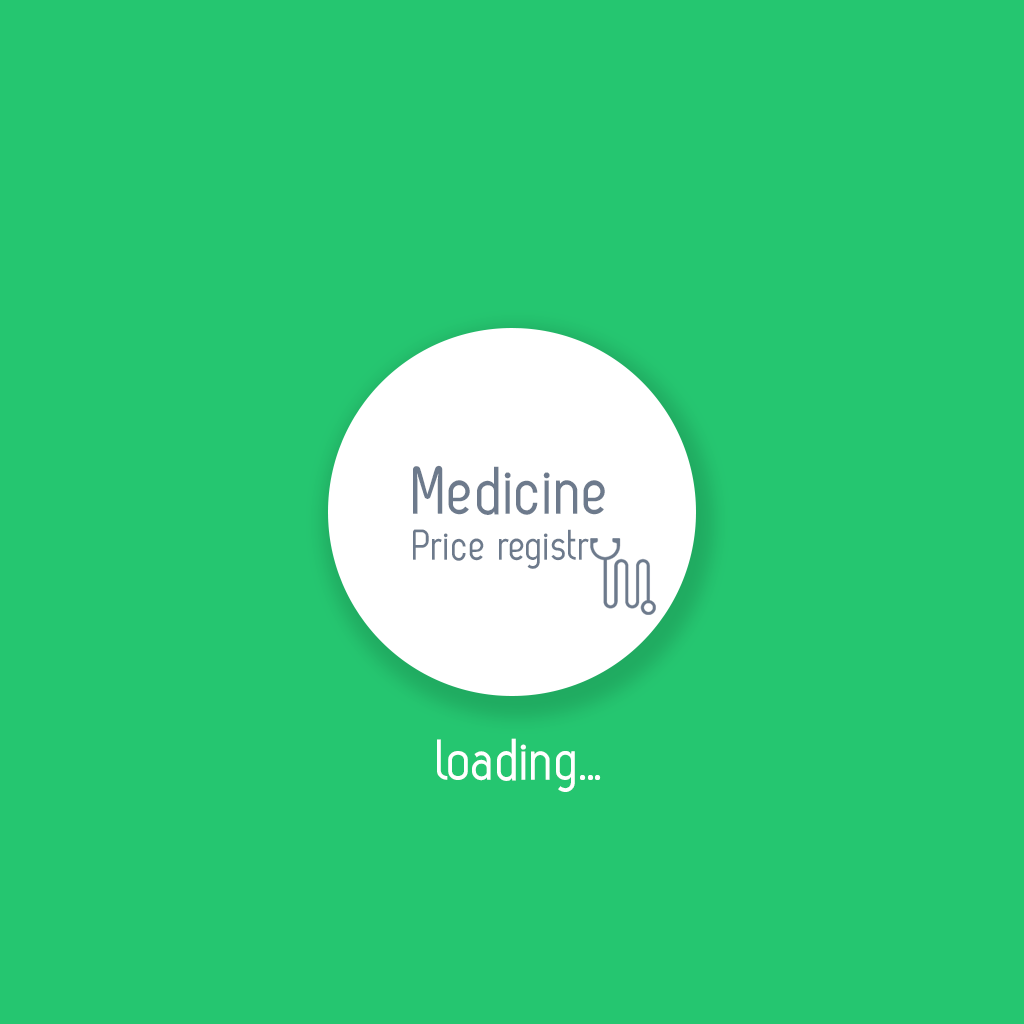
<style>
.page{position:relative;width:1024px;height:1024px;background:#25c670}
.page>*{position:absolute;margin:0}
.t1{font:44.1px/45.5px "ZagRegular";color:#6d7a8c}
.t2{font:68.9px/61.6px "ZagRegular";color:#6d7a8c}
.t3{font:59.7px "ZagRegular";color:#ffffff}
.t4{font:60.1px "ZagRegular";color:#ffffff}
</style>
<div class="page">
<p class="t1" style="left:413px;top:465px;width:192px;height:104px"><span class="t2">Medicine<br></span>Price registr</p>
<p class="t3" style="left:437px;top:738px;width:138px;height:54px">loading</p>
<p class="t4" style="left:580px;top:775px;width:21px;height:5px">...</p>
</div>
